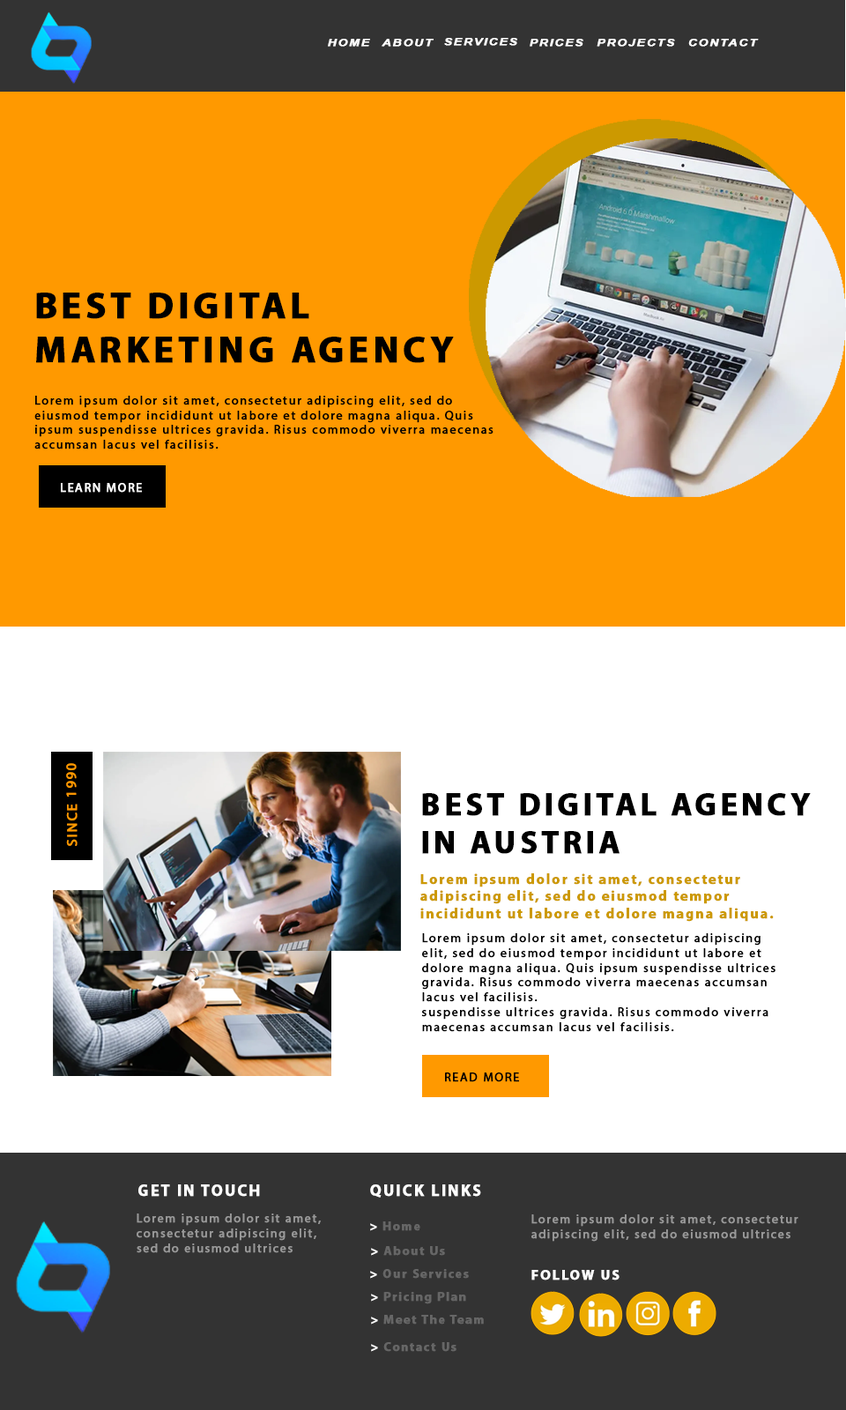
<style>
.page{position:relative;width:846px;height:1410px;background:#ffffff}
.page>*{position:absolute;margin:0}
.t1{font:9.9px "Arial-BoldItalicMT";letter-spacing:0.1em;color:#ffffff;font-weight:bold;scale:1.25 1}
.t2{font:37px "MyriadPro-Bold";letter-spacing:0.1em;color:#000000;font-weight:bold}
.t3{font:12.3px "MyriadPro-Regular";letter-spacing:0.1em;color:#000000;font-weight:bold}
.t4{font:12.3px "MyriadPro-Regular";letter-spacing:0.1em;color:#ffffff;font-weight:bold}
.t5{font:14.1px "MyriadPro-Regular";letter-spacing:0.1em;color:#ff9900;font-weight:bold}
.t6{font:31.7px "MyriadPro-Bold";letter-spacing:0.1em;color:#000000;font-weight:bold}
.t7{font:14.1px "MyriadPro-Bold";letter-spacing:0.1em;color:#cc9900;font-weight:bold}
.t8{font:15.9px "MyriadPro-Bold";letter-spacing:0.1em;color:#ffffff;font-weight:bold}
.t9{font:12.3px "MyriadPro-Regular";letter-spacing:0.1em;color:#999999;font-weight:bold}
.t10{font:12.3px "MyriadPro-Bold";letter-spacing:0.1em;color:#666666;font-weight:bold}
.t11{font:12.3px "MyriadPro-Bold";letter-spacing:0.1em;color:#ffffff;font-weight:bold}
.t12{font:14.1px "MyriadPro-Bold";letter-spacing:0.1em;color:#ffffff;font-weight:bold}
</style>
<div class="page">
<p class="t1" style="left:328px;top:39px;width:42px;height:8px">HOME</p>
<p class="t1" style="left:382px;top:39px;width:51px;height:8px">ABOUT</p>
<p class="t1" style="left:444px;top:38px;width:73px;height:8px">SERVICES</p>
<p class="t1" style="left:530px;top:39px;width:53px;height:8px">PRICES</p>
<p class="t1" style="left:596px;top:39px;width:79px;height:8px">PROJECTS</p>
<p class="t1" style="left:688px;top:39px;width:71px;height:8px">CONTACT</p>
<p class="t2" style="left:36px;top:293px;width:418px;height:70px">BEST DIGITAL<br>MARKETING AGENCY</p>
<p class="t3" style="left:34px;top:396px;width:459px;height:53px">Lorem ipsum dolor sit amet, consectetur adipiscing elit, sed do eiusmod tempor incididunt ut labore et dolore magna aliqua. Quis ipsum suspendisse ultrices gravida. Risus commodo viverra maecenas accumsan lacus vel facilisis.</p>
<p class="t4" style="left:61px;top:483px;width:81px;height:10px">LEARN MORE</p>
<p class="t5" style="left:66px;top:763px;width:12px;height:83px;rotate:-90deg">SINCE 1990</p>
<p class="t6" style="left:422px;top:793px;width:389px;height:61px">BEST DIGITAL AGENCY  IN AUSTRIA</p>
<p class="t7" style="left:420px;top:873px;width:354px;height:49px">Lorem ipsum dolor sit amet, consectetur adipiscing elit, sed do eiusmod tempor incididunt ut labore et dolore magna aliqua.</p>
<p class="t3" style="left:421px;top:933px;width:354px;height:99px">Lorem ipsum dolor sit amet, consectetur adipiscing elit, sed do eiusmod tempor incididunt ut labore et dolore magna aliqua. Quis ipsum suspendisse ultrices gravida. Risus commodo viverra maecenas accumsan lacus vel facilisis. <br>suspendisse ultrices gravida. Risus commodo viverra maecenas accumsan lacus vel facilisis.</p>
<p class="t3" style="left:445px;top:1072px;width:74px;height:10px">READ MORE</p>
<p class="t8" style="left:138px;top:1184px;width:122px;height:13px">GET IN TOUCH</p>
<p class="t8" style="left:370px;top:1184px;width:111px;height:13px">QUICK LINKS</p>
<p class="t9" style="left:137px;top:1213px;width:184px;height:40px">Lorem ipsum dolor sit amet, consectetur adipiscing elit, sed do eiusmod ultrices</p>
<p class="t9" style="left:531px;top:1214px;width:267px;height:27px">Lorem ipsum dolor sit amet, consectetur adipiscing elit, sed do eiusmod ultrices</p>
<p class="t10" style="left:370px;top:1221px;width:50px;height:10px"><span class="t11">&gt; </span>Home</p>
<p class="t10" style="left:371px;top:1246px;width:74px;height:10px"><span class="t11">&gt; </span>About Us</p>
<p class="t10" style="left:370px;top:1269px;width:99px;height:9px"><span class="t11">&gt; </span>Our Services</p>
<p class="t12" style="left:531px;top:1270px;width:88px;height:10px">FOLLOW US</p>
<p class="t10" style="left:371px;top:1292px;width:95px;height:12px"><span class="t11">&gt; </span>Pricing Plan</p>
<p class="t10" style="left:371px;top:1315px;width:113px;height:9px"><span class="t11">&gt; </span>Meet The Team</p>
<p class="t10" style="left:371px;top:1342px;width:85px;height:10px"><span class="t11">&gt; </span>Contact Us</p>
</div>
